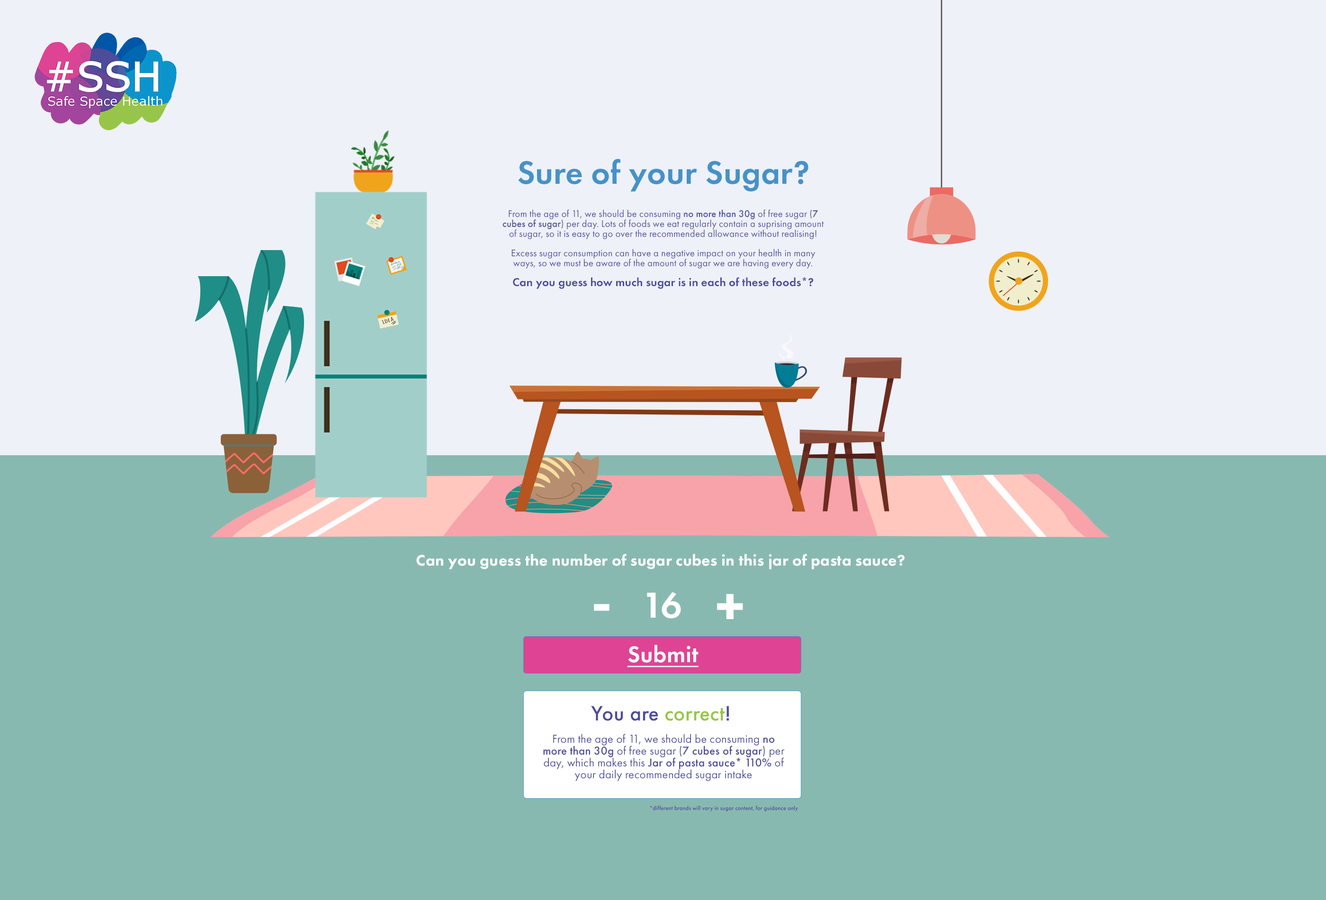
<style>
.page{position:relative;width:1326px;height:900px;background:#eef1f8}
.page>*{position:absolute;margin:0}
.t1{font:33.5px "FuturaPT-Demi";letter-spacing:0.01em;color:#4692c7}
.t2{font:9.9px/9.9px "FuturaPT-Book";letter-spacing:0.01em;color:#4e4d9b}
.t3{font:9.9px/9.9px "FuturaPT-Medium";letter-spacing:0.01em;color:#4e4d9b}
.t4{font:11.8px/9.9px "FuturaPT-Demi";letter-spacing:0.01em;color:#4e4d9b}
.t5{font:15.8px "FuturaPT-Heavy";letter-spacing:0.01em;color:#ffffff}
.t6{font:37.5px "FuturaPT-Demi";letter-spacing:0.01em;color:#ffffff}
.t7{font:59.2px "FuturaPT-Demi";letter-spacing:0.01em;color:#ffffff}
.t8{font:23.7px "FuturaPT-Demi";letter-spacing:0.01em;color:#ffffff;text-decoration:underline}
.t9{font:21.7px "FuturaPT-Medium";letter-spacing:0.01em;color:#4e4d9b}
.t10{font:21.7px "FuturaPT-Medium";letter-spacing:0.01em;color:#98c649}
.t11{font:11.8px/11.8px "FuturaPT-Book";letter-spacing:0.01em;color:#4e4d9b}
.t12{font:11.8px/11.8px "FuturaPT-Medium";letter-spacing:0.01em;color:#4e4d9b}
.t13{font:5.9px "FuturaPT-Medium";letter-spacing:0.01em;color:#4e4d9b}
</style>
<div class="page">
<p class="t1" style="left:518px;top:159px;width:290px;height:33px">Sure of your Sugar?</p>
<p class="t2" style="left:502px;top:209px;width:322px;height:80px;text-align:center">From the age of 11, we should be consuming <span class="t3">no more than 30g</span> of free sugar (<span class="t3">7 cubes of sugar</span>) per day. Lots of foods we eat regularly contain a suprising amount of sugar, so it is easy to go over the recommended allowance without realising! <br><br>Excess sugar consumption can have a negative impact on your health in many ways, so we must be aware of the amount of sugar we are having every day. <br><br><span class="t4">Can you guess how much sugar is in each of these foods*?</span></p>
<p class="t5" style="left:416px;top:553px;width:488px;height:16px">Can you guess the number of sugar cubes in this jar of pasta sauce?</p>
<p class="t6" style="left:647px;top:591px;width:34px;height:27px">16</p>
<p class="t7" style="left:717px;top:594px;width:26px;height:25px">+</p>
<p class="t7" style="left:594px;top:604px;width:15px;height:7px">-</p>
<p class="t8" style="left:627px;top:644px;width:71px;height:23px">Submit</p>
<p class="t9" style="left:591px;top:705px;width:138px;height:16px">You are <span class="t10">correct</span>!</p>
<p class="t11" style="left:543px;top:733px;width:241px;height:48px;text-align:center">From the age of 11, we should be consuming <span class="t12">no more than 30g</span> of free sugar (<span class="t12">7 cubes of sugar</span>) per day, which makes this <span class="t12">Jar of pasta sauce* 110%</span> of your daily recommended sugar intake</p>
<p class="t13" style="left:650px;top:805px;width:148px;height:6px">*different brands will vary in sugar content, for guidance only</p>
</div>
